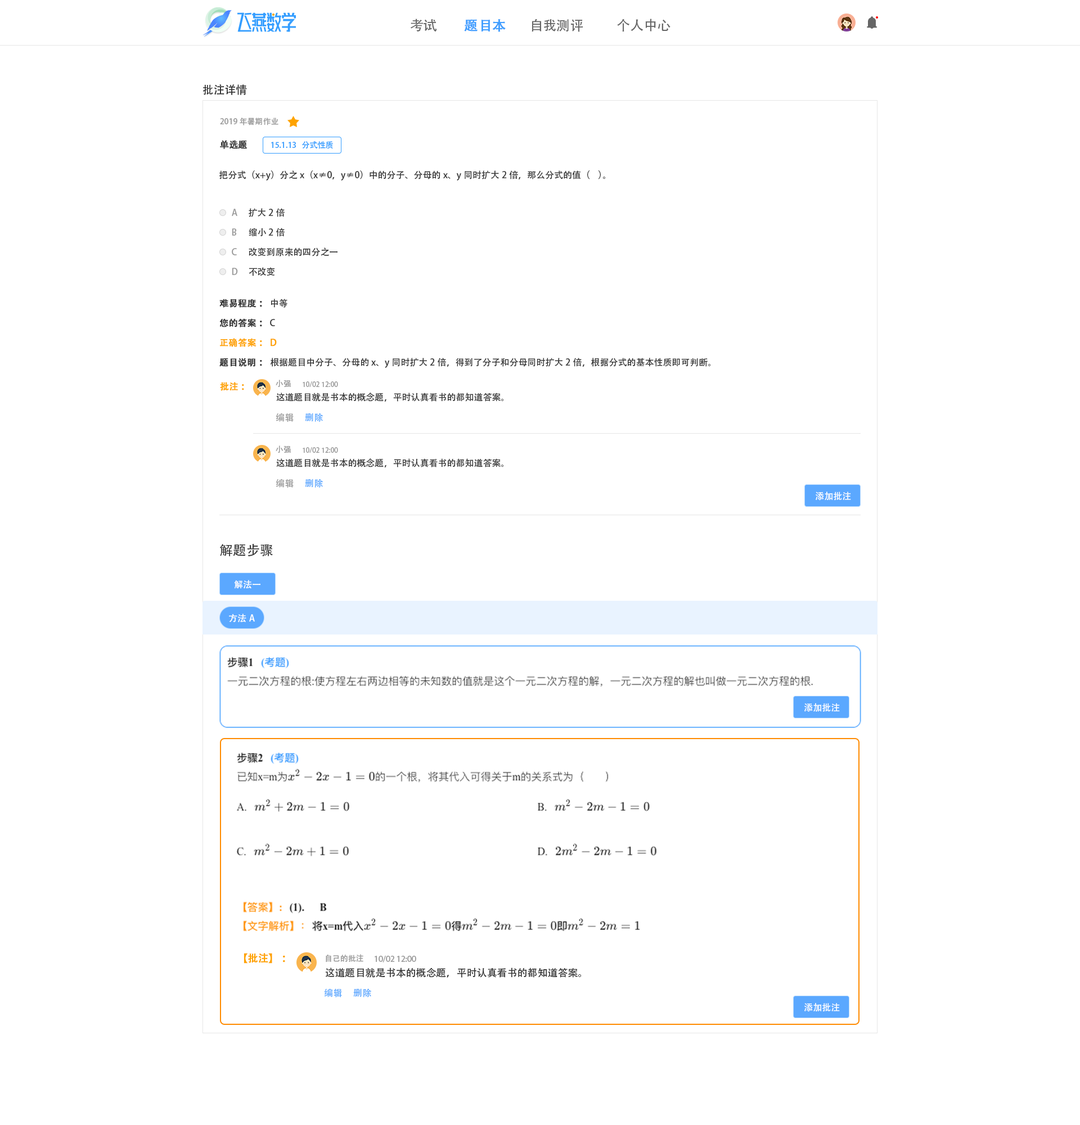
<style>
.page{position:relative;width:1080px;height:1125px;background:#ffffff}
.page>*{position:absolute;margin:0}
.t1{font:13.5px "AdobeHeitiStd-Regular";color:#666666}
.t2{font:13.5px "AdobeHeitiStd-Regular";color:#409eff;font-weight:bold}
.t3{font:11.2px "AdobeHeitiStd-Regular";color:#333333}
.t4{font:7.9px "AdobeHeitiStd-Regular";color:#999999}
.t5{font:9px "AdobeHeitiStd-Regular";color:#333333;font-weight:bold}
.t6{font:7.9px "AdobeHeitiStd-Regular";color:#339dff}
.t7{font:9px "AdobeHeitiStd-Regular";color:#333333}
.t8{font:9px "AdobeHeitiStd-Regular";color:#999999}
.t9{font:9px "AdobeHeitiStd-Regular";color:#fea300;font-weight:bold}
.t10{font:6.8px "AdobeHeitiStd-Regular";color:#999999}
.t11{font:9px "AdobeHeitiStd-Regular";color:#5ba8ff}
.t12{font:9px "AdobeHeitiStd-Regular";color:#ffffff}
.t13{font:13.5px "AdobeHeitiStd-Regular";color:#333333}
.t14{font:10.1px "AdobeHeitiStd-Regular";color:#fea300;font-weight:bold}
.t15{font:10.1px "AdobeHeitiStd-Regular";color:#333333}
</style>
<div class="page">
<p class="t1" style="left:410px;top:19px;width:27px;height:13px">考试</p>
<p class="t2" style="left:464px;top:19px;width:42px;height:13px">题目本</p>
<p class="t1" style="left:532px;top:19px;width:51px;height:13px">自我测评</p>
<p class="t1" style="left:617px;top:19px;width:53px;height:13px">个人中心</p>
<p class="t3" style="left:203px;top:84px;width:44px;height:11px">批注详情</p>
<p class="t4" style="left:220px;top:118px;width:58px;height:7px">2019年暑期作业</p>
<p class="t5" style="left:220px;top:140px;width:28px;height:9px">单选题</p>
<p class="t6" style="left:271px;top:141px;width:62px;height:8px">15.1.13   分式性质</p>
<p class="t7" style="left:219px;top:170px;width:386px;height:11px">把分式（x+y）分之x（x≠0，y≠0）中的分子、分母的x、y同时扩大2倍，那么分式的值（    ）。</p>
<p class="t8" style="left:232px;top:209px;width:5px;height:7px">A</p>
<p class="t7" style="left:249px;top:208px;width:36px;height:9px">扩大2倍</p>
<p class="t8" style="left:232px;top:228px;width:5px;height:8px">B</p>
<p class="t7" style="left:249px;top:228px;width:36px;height:9px">缩小2倍</p>
<p class="t8" style="left:232px;top:248px;width:5px;height:7px">C</p>
<p class="t7" style="left:249px;top:248px;width:89px;height:8px">改变到原来的四分之一</p>
<p class="t8" style="left:232px;top:268px;width:6px;height:7px">D</p>
<p class="t7" style="left:249px;top:267px;width:26px;height:9px">不改变</p>
<p class="t5" style="left:219px;top:299px;width:68px;height:9px">难易程度：<span class="t7"> 中等</span></p>
<p class="t5" style="left:219px;top:318px;width:56px;height:9px">您的答案：<span class="t7"> C</span></p>
<p class="t9" style="left:220px;top:338px;width:57px;height:9px">正确答案： D</p>
<p class="t7" style="left:219px;top:358px;width:491px;height:10px"><span class="t5">题目说明： </span>根据题目中分子、分母的x、y同时扩大2倍，得到了分子和分母同时扩大2倍，根据分式的基本性质即可判断。</p>
<p class="t9" style="left:220px;top:382px;width:24px;height:9px">批注：</p>
<p class="t4" style="left:276px;top:380px;width:15px;height:7px">小强</p>
<p class="t10" style="left:303px;top:381px;width:35px;height:7px">10/02 12:00</p>
<p class="t7" style="left:276px;top:393px;width:227px;height:9px">这道题目就是书本的概念题，平时认真看书的都知道答案。</p>
<p class="t8" style="left:276px;top:413px;width:18px;height:9px">编辑</p>
<p class="t11" style="left:305px;top:413px;width:18px;height:9px">删除</p>
<p class="t4" style="left:276px;top:446px;width:15px;height:7px">小强</p>
<p class="t10" style="left:303px;top:447px;width:35px;height:6px">10/02 12:00</p>
<p class="t7" style="left:276px;top:458px;width:227px;height:9px">这道题目就是书本的概念题，平时认真看书的都知道答案。</p>
<p class="t8" style="left:276px;top:479px;width:18px;height:9px">编辑</p>
<p class="t11" style="left:305px;top:479px;width:18px;height:9px">删除</p>
<p class="t12" style="left:816px;top:492px;width:35px;height:9px">添加批注</p>
<p class="t13" style="left:220px;top:544px;width:53px;height:12px">解题步骤</p>
<p class="t12" style="left:234px;top:580px;width:26px;height:9px">解法一</p>
<p class="t12" style="left:229px;top:614px;width:26px;height:9px">方法A</p>
<p class="t12" style="left:804px;top:703px;width:36px;height:9px">添加批注</p>
<p class="t14" style="left:244px;top:953px;width:41px;height:11px">【批注】：</p>
<p class="t4" style="left:326px;top:954px;width:37px;height:8px">自己的批注</p>
<p class="t4" style="left:375px;top:956px;width:41px;height:6px">10/02 12:00</p>
<p class="t15" style="left:325px;top:968px;width:256px;height:10px">这道题目就是书本的概念题，平时认真看书的都知道答案。</p>
<p class="t11" style="left:324px;top:988px;width:18px;height:9px">编辑</p>
<p class="t11" style="left:353px;top:988px;width:19px;height:9px">删除</p>
<p class="t12" style="left:804px;top:1003px;width:36px;height:9px">添加批注</p>
</div>
